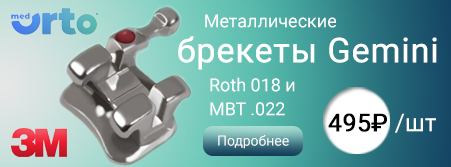
<style>
.page{position:relative;width:451px;height:167px}
.page>*{position:absolute;margin:0}
.t1{font:34.1px/35px "Roboto-Regular";color:#ffffff;font-weight:bold}
.t2{font:18px/35px "Roboto-Regular";color:#ffffff}
.t3{font:18px/24px "Roboto-Regular";color:#ffffff}
.t4{font:24.6px "Roboto-Regular";color:#000101;font-weight:bold}
.t5{font:24.6px "Roboto-Regular";color:#ffffff}
.t6{font:14px "Roboto-Regular";color:#ffffff}
</style>
<div class="page">
<p class="t1" style="left:178px;top:14px;width:259px;height:56px"><span class="t2">      Металлические<br></span>брекеты Gemini</p>
<p class="t3" style="left:210px;top:77px;width:85px;height:39px">Roth 018 и <br>MBT .022</p>
<p class="t4" style="left:328px;top:113px;width:108px;height:20px">495₽ <span class="t5">/шт</span></p>
<p class="t6" style="left:218px;top:135px;width:71px;height:14px">Подробнее</p>
</div>
